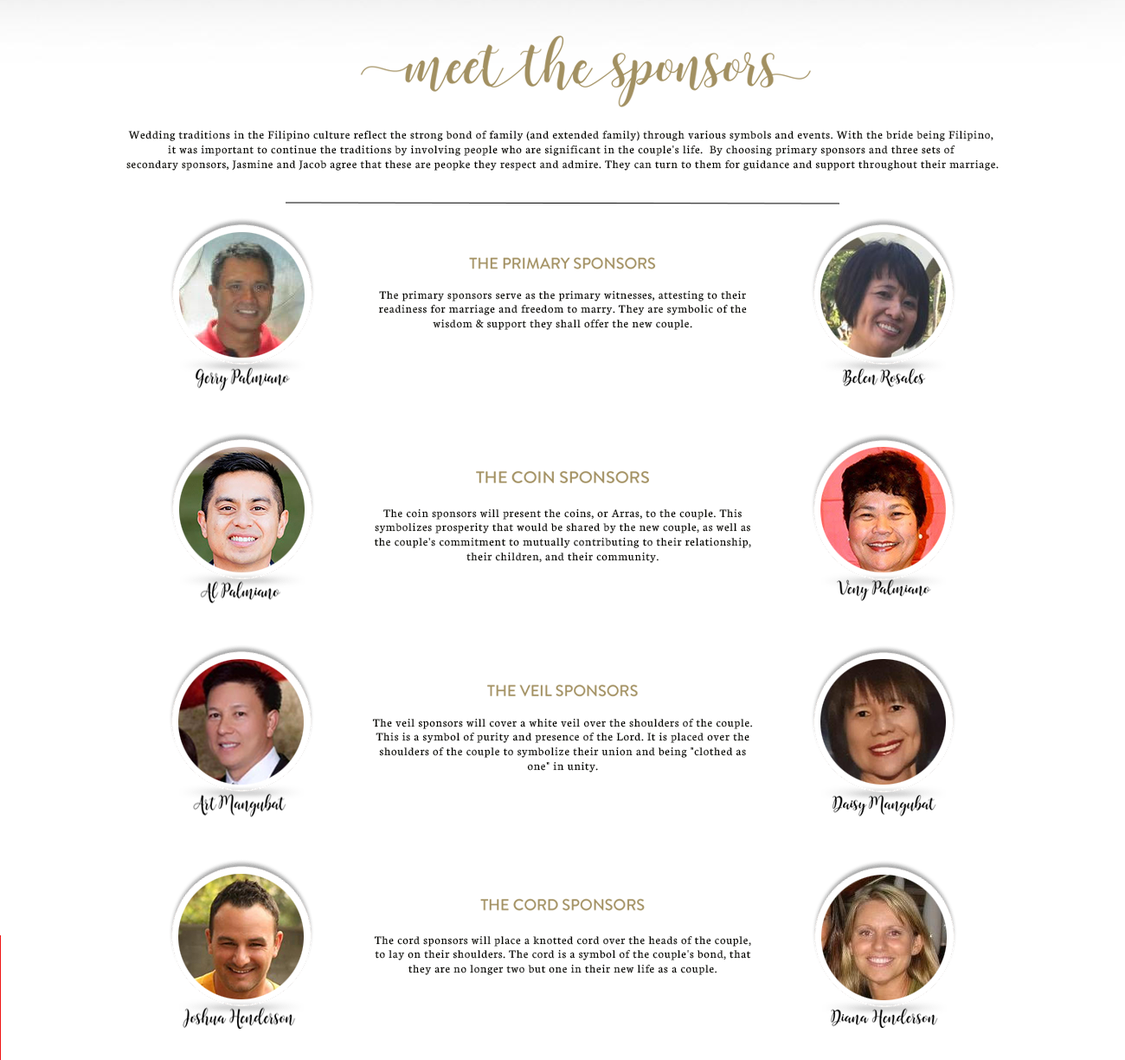
<style>
.page{position:relative;width:1125px;height:1060px;background:#ffffff}
.page>*{position:absolute;margin:0}
.t1{font:12.1px "Neuton-Regular";letter-spacing:0.05em;color:#050400}
</style>
<div class="page">
<p class="t1" style="left:126px;top:130px;width:873px;height:41px;text-align:center">Wedding traditions in the Filipino culture reflect the strong bond of family (and extended family) through various symbols and events. With the bride being Filipino, <br>it was important to continue the traditions by involving people who are significant in the couple's life.  By choosing primary sponsors and three sets of <br>secondary sponsors, Jasmine and Jacob agree that these are peopke they respect and admire. They can turn to them for guidance and support throughout their marriage.</p>
<p class="t1" style="left:378px;top:290px;width:369px;height:40px;text-align:center">The primary sponsors serve as the primary witnesses, attesting to their readiness for marriage and freedom to marry. They are symbolic of the wisdom &amp; support they shall offer the new couple.</p>
<p class="t1" style="left:374px;top:508px;width:377px;height:55px;text-align:center">The coin sponsors will present the coins, or Arras, to the couple. This symbolizes prosperity that would be shared by the new couple, as well as the couple's commitment to mutually contributing to their relationship, their children, and their community.</p>
<p class="t1" style="left:372px;top:718px;width:381px;height:54px;text-align:center">The veil sponsors will cover a white veil over the shoulders of the couple. This is a symbol of purity and presence of the Lord. It is placed over the shoulders of the couple to symbolize their union and being "clothed as one" in unity.</p>
<p class="t1" style="left:374px;top:935px;width:377px;height:40px;text-align:center">The cord sponsors will place a knotted cord over the heads of the couple, to lay on their shoulders. The cord is a symbol of the couple's bond, that they are no longer two but one in their new life as a couple.</p>
</div>
